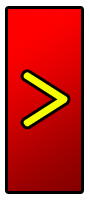
<style>
.page{position:relative;width:90px;height:200px}
.page>*{position:absolute;margin:0}
.t1{font:83.3px "wearealien!!";color:#f6ff00}
</style>
<div class="page">
<p class="t1" style="left:23px;top:72px;width:45px;height:55px">&gt;</p>
</div>
